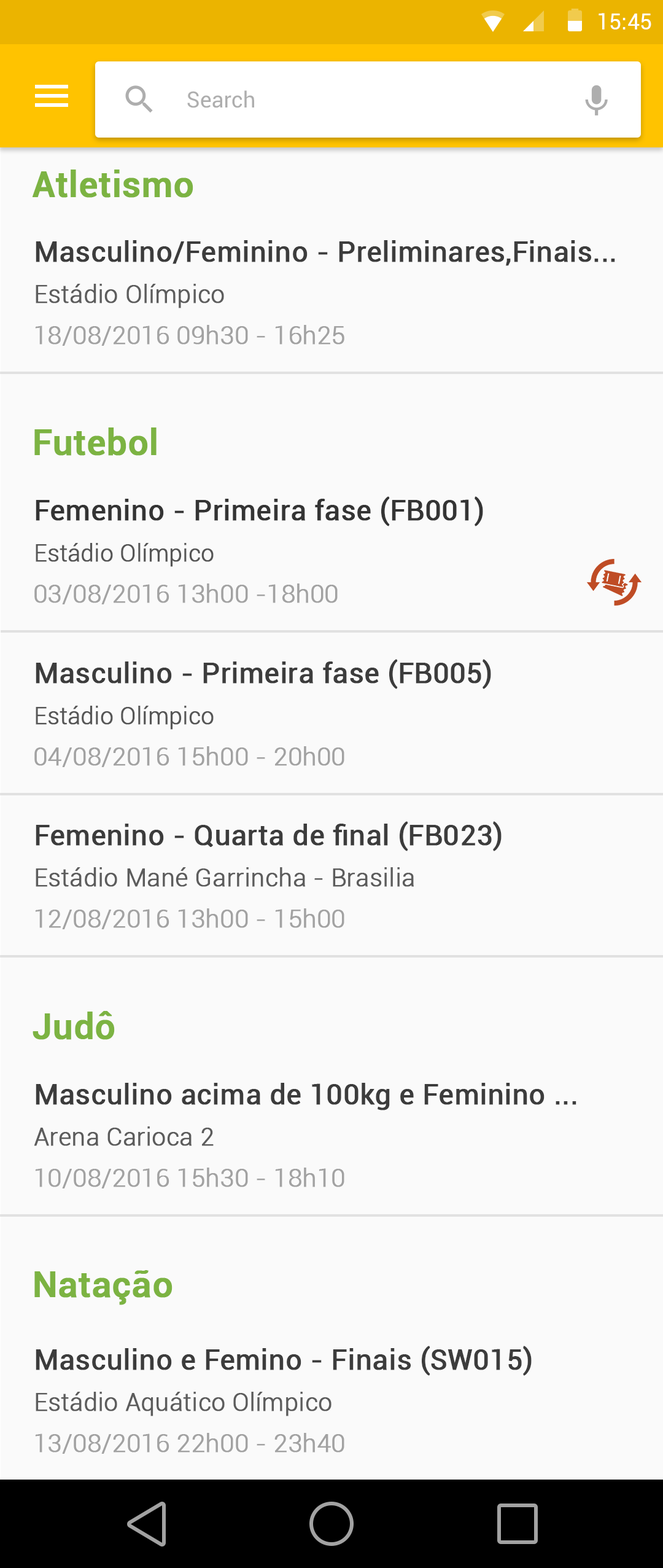
<style>
.page{position:relative;width:663px;height:1568px;background:#fafafa}
.page>*{position:absolute;margin:0}
.t1{font:22.1px "Roboto-Regular";color:#ffffff}
.t2{font:22.2px "Roboto-Regular";color:#aeaeae}
.t3{font:35.8px "Roboto-Medium";color:#7cb342;font-weight:bold}
.t4{font:28.3px "Roboto-Regular";color:#3c3c3c;font-weight:bold}
.t5{font:24.6px "Roboto-Light";color:#5c5c5c;font-weight:bold}
.t6{font:24.9px "Roboto-Light";color:#a2a2a2;font-weight:bold}
.t7{font:28.3px "Roboto-Regular";color:#343434;font-weight:bold}
.t8{font:23.2px "Roboto-Light";color:#565656;font-weight:bold}
</style>
<div class="page">
<p class="t1" style="left:599px;top:13px;width:53px;height:16px">15:45</p>
<p class="t2" style="left:187px;top:90px;width:67px;height:18px">Search</p>
<p class="t3" style="left:33px;top:170px;width:160px;height:28px">Atletismo</p>
<p class="t4" style="left:36px;top:240px;width:579px;height:26px">Masculino/Feminino - Preliminares,Finais...</p>
<p class="t5" style="left:36px;top:284px;width:188px;height:24px">Estádio Olímpico</p>
<p class="t6" style="left:35px;top:325px;width:310px;height:21px">18/08/2016 09h30 - 16h25</p>
<p class="t3" style="left:34px;top:427px;width:123px;height:29px">Futebol</p>
<p class="t7" style="left:36px;top:496px;width:447px;height:30px">Femenino - Primeira fase (FB001)</p>
<p class="t8" style="left:36px;top:543px;width:178px;height:24px">Estádio Olímpico</p>
<p class="t6" style="left:34px;top:583px;width:304px;height:21px">03/08/2016 13h00 -18h00</p>
<p class="t4" style="left:36px;top:659px;width:455px;height:30px">Masculino - Primeira fase (FB005)</p>
<p class="t8" style="left:36px;top:706px;width:178px;height:24px">Estádio Olímpico</p>
<p class="t6" style="left:34px;top:746px;width:311px;height:21px">04/08/2016 15h00 - 20h00</p>
<p class="t4" style="left:36px;top:821px;width:466px;height:30px">Femenino - Quarta de final (FB023)</p>
<p class="t5" style="left:36px;top:867px;width:378px;height:20px">Estádio Mané Garrincha - Brasilia</p>
<p class="t6" style="left:35px;top:908px;width:310px;height:21px">12/08/2016 13h00 - 15h00</p>
<p class="t3" style="left:33px;top:1011px;width:82px;height:29px">Judô</p>
<p class="t4" style="left:36px;top:1083px;width:541px;height:27px">Masculino acima de 100kg e Feminino ...</p>
<p class="t5" style="left:34px;top:1126px;width:180px;height:20px">Arena Carioca 2</p>
<p class="t6" style="left:35px;top:1168px;width:310px;height:20px">10/08/2016 15h30 - 18h10</p>
<p class="t3" style="left:34px;top:1270px;width:139px;height:35px">Natação</p>
<p class="t4" style="left:36px;top:1346px;width:496px;height:30px">Masculino e Femino - Finais (SW015)</p>
<p class="t5" style="left:36px;top:1392px;width:296px;height:24px">Estádio Aquático Olímpico</p>
<p class="t6" style="left:35px;top:1433px;width:310px;height:21px">13/08/2016 22h00 - 23h40</p>
</div>
